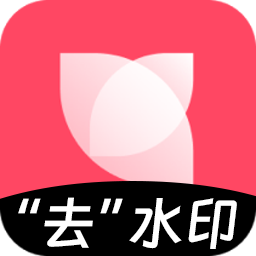
<style>
.page{position:relative;width:256px;height:256px;background:#ff4763}
.page>*{position:absolute;margin:0}
.t1{font:58.3px "DingTalk-JinBuTi";letter-spacing:-0.03em;color:#ffffff}
.t2{font:58.3px "DingTalk-JinBuTi";letter-spacing:-0.46em;color:#ffffff}
</style>
<div class="page">
<p class="t1" style="left:18px;top:197px;width:219px;height:52px">“去<span class="t2">”</span>水印</p>
</div>
